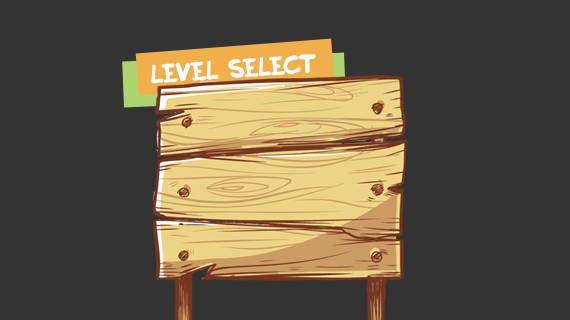
<style>
.page{position:relative;width:570px;height:320px;background:#333333}
.page>*{position:absolute;margin:0}
.t1{font:25px "Inky";color:#ffffff}
</style>
<div class="page">
<p class="t1" style="left:151px;top:54px;width:165px;height:30px;rotate:-4deg">level select</p>
</div>
